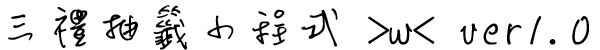
<style>
.page{position:relative;width:600px;height:50px;background:#ffffff}
.page>*{position:absolute;margin:0}
.t1{font:54.9px "DFLiu-W3-WIN-BF";letter-spacing:-0.09em;color:#000000}
</style>
<div class="page">
<p class="t1" style="left:8px;top:5px;width:581px;height:45px">三禮抽籤小程式 &gt;w&lt; ver1.0</p>
</div>
